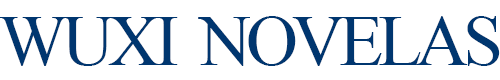
<style>
.page{position:relative;width:500px;height:80px;background:#ffffff}
.page>*{position:absolute;margin:0}
.t1{font:72.2px "TimesNewRomanPSMT";letter-spacing:-0.075em;color:#00366f;text-transform:uppercase}
</style>
<div class="page">
<p class="t1" style="left:0px;top:16px;width:500px;height:50px">WUXI  Novelas</p>
</div>
